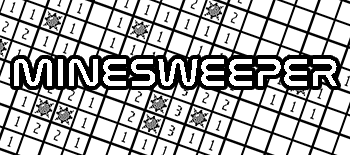
<style>
.page{position:relative;width:350px;height:155px;background:#ffffff}
.page>*{position:absolute;margin:0}
.t1{font:40px "NasalizationRg-Regular";color:#ffffff}
</style>
<div class="page">
<p class="t1" style="left:14px;top:59px;width:323px;height:27px">MINESWEEPER</p>
</div>
